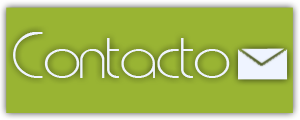
<style>
.page{position:relative;width:300px;height:120px;background:#99b433}
.page>*{position:absolute;margin:0}
.t1{font:75px "Metro-Normal";color:#eff4ff}
</style>
<div class="page">
<p class="t1" style="left:13px;top:32px;width:217px;height:46px">Contacto</p>
</div>
